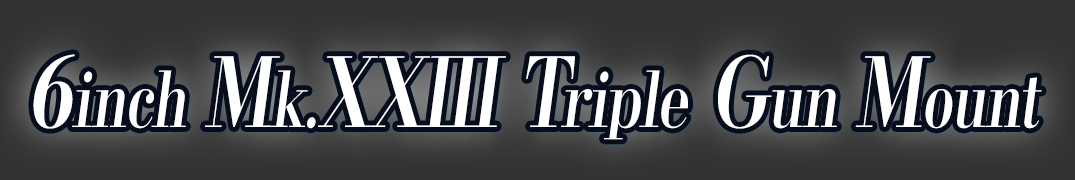
<style>
.page{position:relative;width:1075px;height:180px;background:#333333}
.page>*{position:absolute;margin:0}
.t1{font:96px "KochoStd-Heavy";letter-spacing:-0.02em;color:#ffffff;font-style:italic;scale:0.75 1}
.t2{font:76.8px "KochoStd-Heavy";letter-spacing:-0.02em;color:#ffffff;font-style:italic;scale:0.75 1}
</style>
<div class="page">
<p class="t1" style="left:33px;top:54px;width:1009px;height:86px">6<span class="t2">inch </span>M<span class="t2">k.</span>XXIII T<span class="t2">riple</span> G<span class="t2">un </span>M<span class="t2">ount</span></p>
</div>
